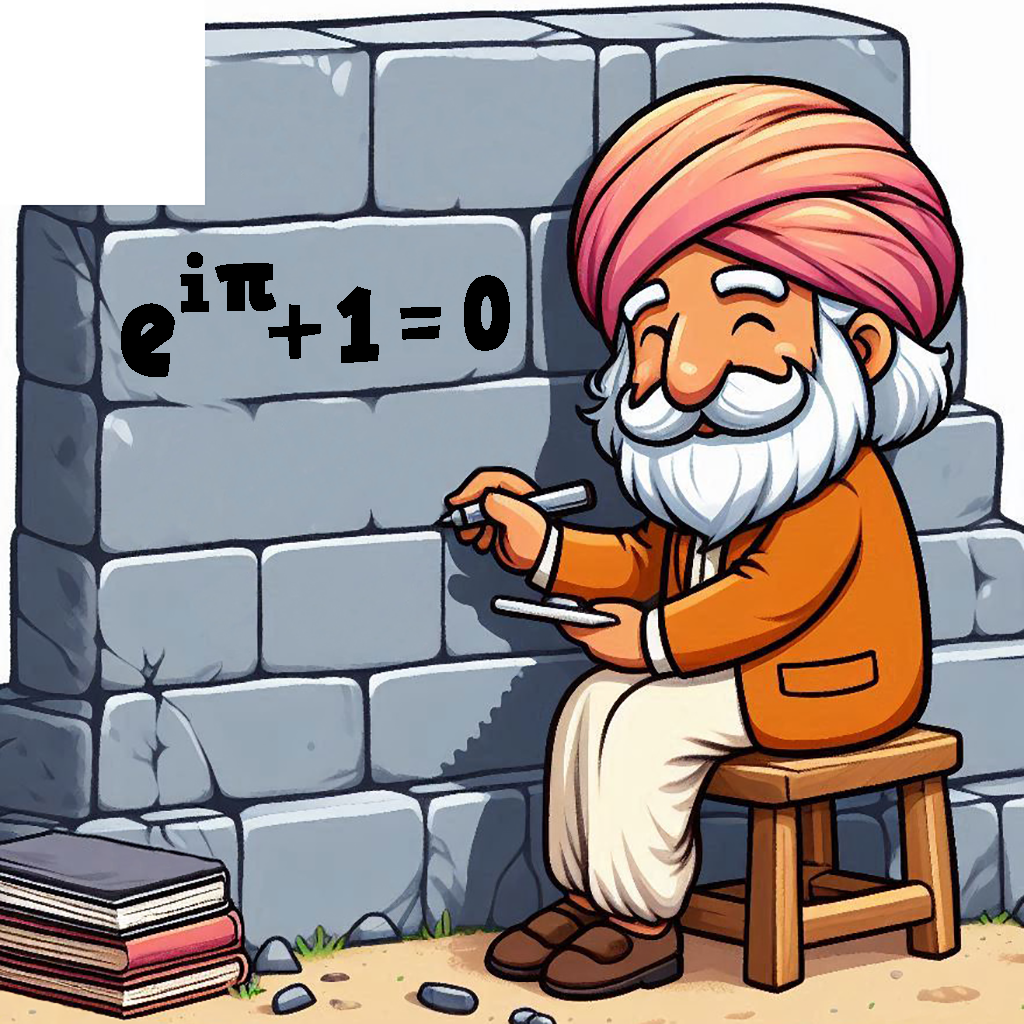
<style>
.page{position:relative;width:1024px;height:1024px}
.page>*{position:absolute;margin:0}
.t1{font:77.7px "HVDComicSerifPro";color:#000000}
.t2{font:93.2px "HVDComicSerifPro";color:#000000}
.t3{font:102.5px "HVDComicSerifPro";color:#000000;scale:0.82 1}
.t4{font:102.5px "HVDComicSerifPro";color:#000000;scale:0.91 1}
.t5{font:139.8px "HVDComicSerifPro";color:#000000;scale:0.8 1}
</style>
<div class="page">
<p class="t1" style="left:180px;top:252px;width:96px;height:61px">i<span class="t2">π</span></p>
<p class="t3" style="left:464px;top:275px;width:46px;height:76px">0</p>
<p class="t4" style="left:337px;top:286px;width:42px;height:77px">1</p>
<p class="t5" style="left:121px;top:303px;width:54px;height:74px">e</p>
<p class="t2" style="left:268px;top:304px;width:53px;height:55px">+</p>
<p class="t4" style="left:400px;top:307px;width:41px;height:33px">=</p>
</div>
